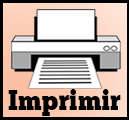
<style>
.page{position:relative;width:129px;height:120px}
.page>*{position:absolute;margin:0}
.t1{font:28.1px "ChunkFiveEx";color:#000000;scale:0.93 1}
</style>
<div class="page">
<p class="t1" style="left:8px;top:89px;width:113px;height:27px">Imprimir</p>
</div>
